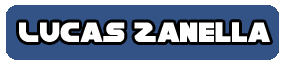
<style>
.page{position:relative;width:284px;height:64px;background:#335285}
.page>*{position:absolute;margin:0}
.t1{font:30px "HanSolo";color:#ffffff}
</style>
<div class="page">
<p class="t1" style="left:19px;top:22px;width:251px;height:20px">Lucas Zanella</p>
</div>
